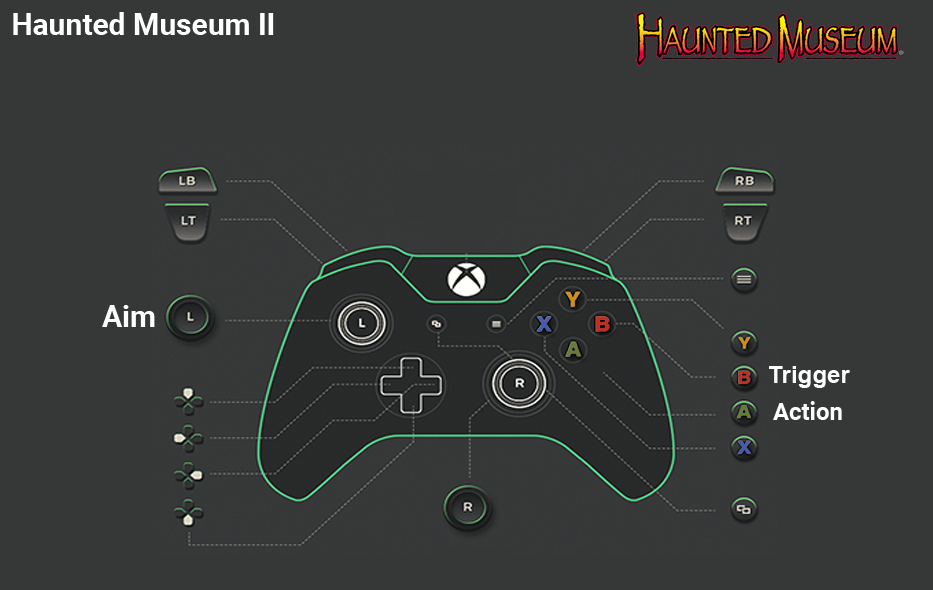
<style>
.page{position:relative;width:933px;height:590px;background:#363838}
.page>*{position:absolute;margin:0}
.t1{font:30px "Roboto-Bold";color:#ffffff}
.t2{font:30px "Roboto-Bold";color:#fefefe}
.t3{font:24px "Arial-BoldMT";color:#fefefe}
.t4{font:24px "Roboto-Bold";color:#ffffff}
</style>
<div class="page">
<p class="t1" style="left:13px;top:12px;width:261px;height:23px">Haunted Museum II</p>
<p class="t2" style="left:102px;top:305px;width:53px;height:22px">Aim</p>
<p class="t3" style="left:769px;top:366px;width:81px;height:22px">Trigger</p>
<p class="t4" style="left:773px;top:401px;width:69px;height:19px">Action</p>
</div>
